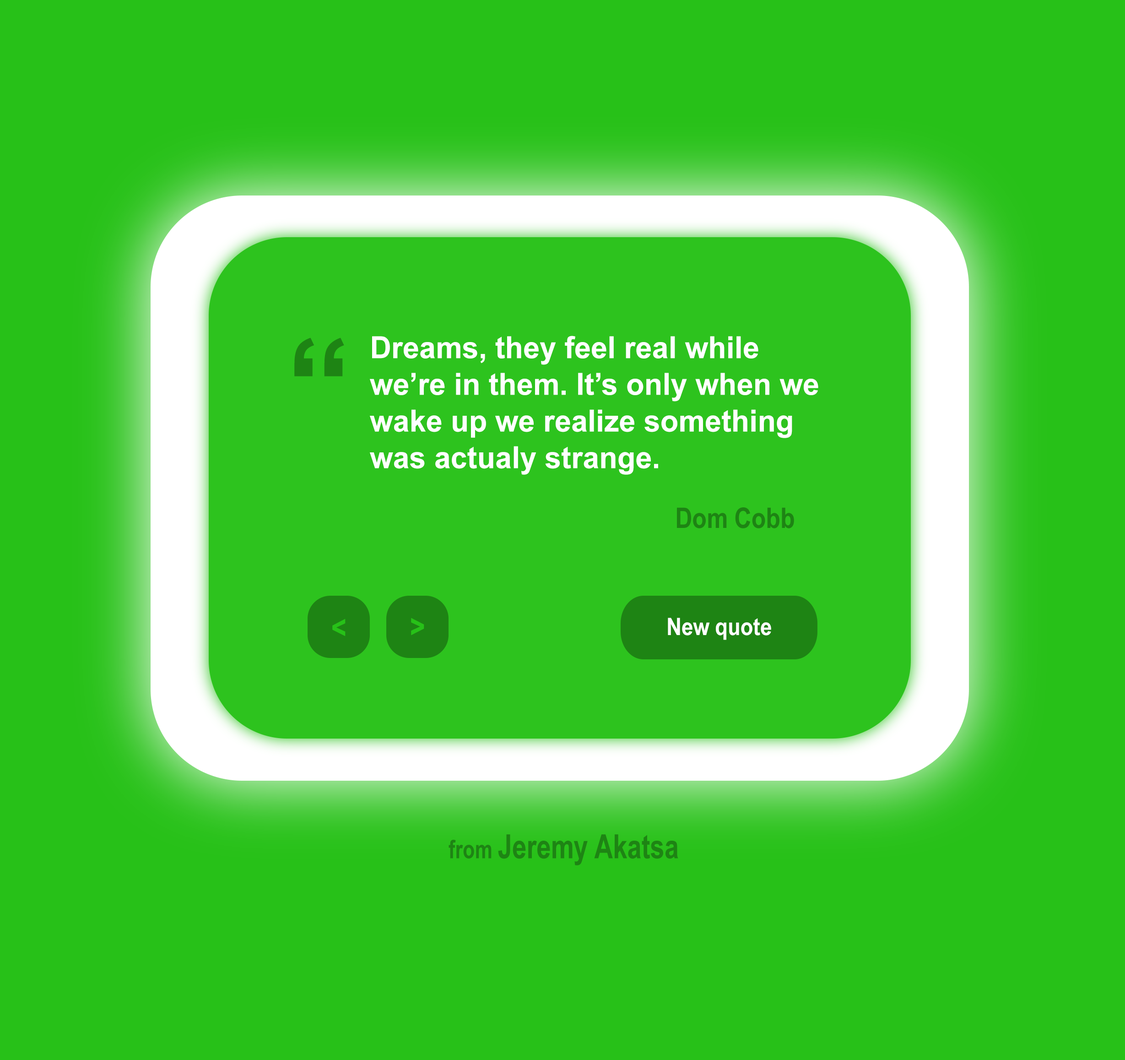
<style>
.page{position:relative;width:1125px;height:1060px;background:#27c118}
.page>*{position:absolute;margin:0}
.t1{font:128.9px "ArialNarrow-Bold";color:#1e8414;scale:1.24 1}
.t2{font:30.6px "ArialNarrow-Bold";color:#ffffff;scale:1.19 1}
.t3{font:28.3px "ArialNarrow-Bold";color:#1e8414}
.t4{font:32px "ArialNarrow-Bold";color:#27c118}
.t5{font:24px "ArialNarrow-Bold";color:#ffffff;scale:1.06 1}
.t6{font:33.4px "ArialNarrow-Bold";color:#1e8414;scale:0.94 1}
.t7{font:25.6px "ArialNarrow-Bold";color:#1e8414;scale:0.94 1}
</style>
<div class="page">
<p class="t1" style="left:294px;top:337px;width:50px;height:39px">“</p>
<p class="t2" style="left:370px;top:336px;width:448px;height:139px">Dreams, they feel real while <br>we’re in them. It’s only when we <br>wake up we realize something <br>was actualy strange.</p>
<p class="t3" style="left:677px;top:507px;width:117px;height:21px">Dom Cobb</p>
<p class="t4" style="left:411px;top:618px;width:13px;height:17px">&gt;</p>
<p class="t5" style="left:668px;top:618px;width:103px;height:22px">New quote</p>
<p class="t4" style="left:332px;top:618px;width:14px;height:18px">&lt;</p>
<p class="t6" style="left:449px;top:834px;width:229px;height:31px"><span class="t7">from </span>Jeremy Akatsa</p>
</div>
